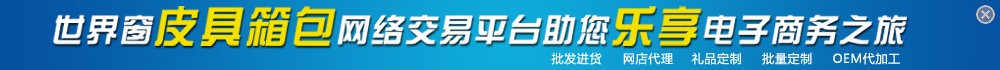
<style>
.page{position:relative;width:1000px;height:70px}
.page>*{position:absolute;margin:0}
.t1{font:31.7px "ç»å¸ç»¼èºä½ç®-regular";letter-spacing:0.05em;color:#ffffff;font-weight:bold;font-style:italic}
.t2{font:42.3px "ç»å¸ç»¼èºä½ç®-regular";letter-spacing:0.05em;color:#f5e100;font-weight:bold;font-style:italic}
.t3{font:12.1px "MicrosoftYaHei";letter-spacing:0.05em;color:#ffffff;text-transform:uppercase}
</style>
<div class="page">
<p class="t1" style="left:53px;top:6px;width:854px;height:40px">世界窗<span class="t2">皮具箱包</span>网络交易平台助您<span class="t2">乐享</span>电子商务之旅</p>
<p class="t3" style="left:551px;top:52px;width:51px;height:13px">批发进货</p>
<p class="t3" style="left:623px;top:52px;width:50px;height:13px">网店代理</p>
<p class="t3" style="left:691px;top:52px;width:50px;height:13px">礼品定制</p>
<p class="t3" style="left:762px;top:52px;width:50px;height:13px">批量定制</p>
<p class="t3" style="left:833px;top:52px;width:67px;height:13px">OEM代加工</p>
</div>
